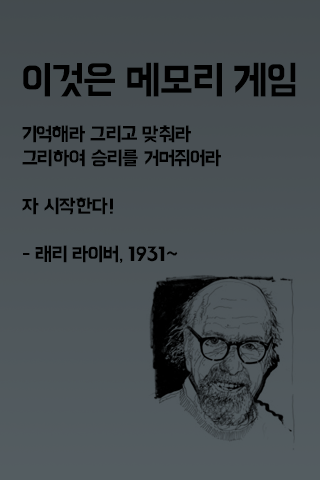
<style>
.page{position:relative;width:320px;height:480px}
.page>*{position:absolute;margin:0}
.t1{font:20px "BM-HANNAStd";color:#000000}
.t2{font:40px "BM-HANNAStd";color:#000000}
</style>
<div class="page">
<p class="t1" style="left:22px;top:62px;width:274px;height:201px"><span class="t2">이것은 메모리 게임<br></span><br>기억해라 그리고 맞춰라<br>그리하여 승리를 거머쥐어라<br><br>자 시작한다!<br><br>- 래리 라이버, 1931~</p>
</div>
